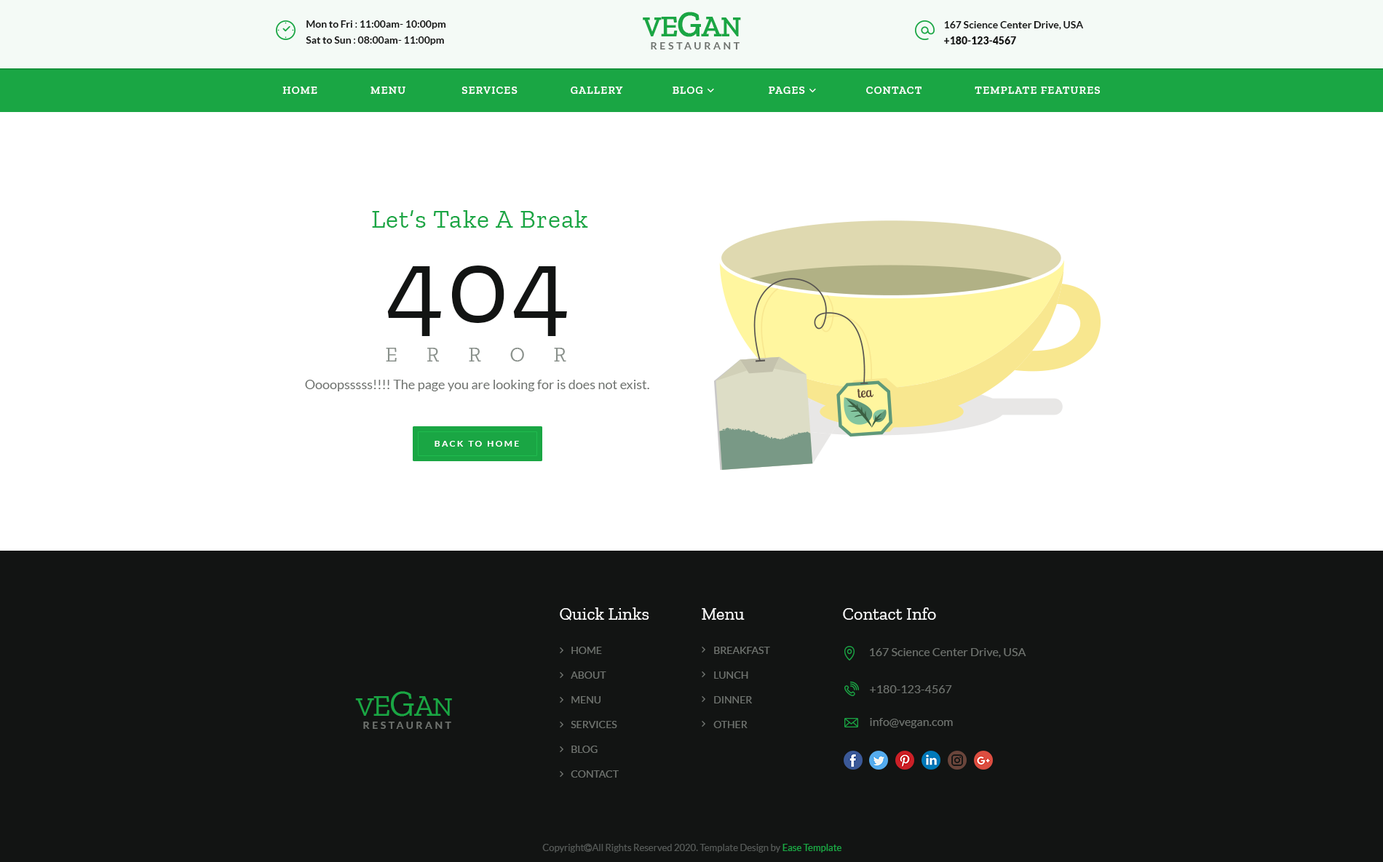
<style>
.page{position:relative;width:1383px;height:862px;background:#ffffff}
.page>*{position:absolute;margin:0}
.t1{font:27.7px "ZillaSlab-SemiBold";letter-spacing:-0.03em;color:#1aa644;text-transform:uppercase}
.t2{font:30.6px "ZillaSlab-SemiBold";letter-spacing:-0.03em;color:#1aa644;text-transform:uppercase}
.t3{font:36.4px "ZillaSlab-SemiBold";letter-spacing:-0.03em;color:#1aa644;text-transform:uppercase}
.t4{font:10.2px/16px "Lato-Bold";color:#121312}
.t5{font:10.2px/16px "Lato-Regular";color:#121312}
.t6{font:10.2px/16px "Lato-Black";color:#121312}
.t7{font:10.2px "Lato-Bold";letter-spacing:0.26em;color:#6e726e;text-transform:uppercase}
.t8{font:26.2px "ZillaSlab-Regular";letter-spacing:0.03em;color:#1aa644}
.t9{font:20.4px/39.3px "ZillaSlab-Regular";letter-spacing:1.43em;color:#89908b;text-transform:uppercase}
.t10{font:107.7px/24px "ZillaSlab-Regular";letter-spacing:0.03em;color:#121413;text-transform:uppercase}
.t11{font:13.1px "Lato-Regular";color:#6e726e}
.t12{font:8.7px "Lato-Bold";letter-spacing:0.2em;color:#ffffff;text-transform:uppercase}
.t13{font:17.5px "ZillaSlab-Regular";color:#ffffff}
.t14{font:10.2px/24.7px "Lato-Regular";color:#6e726e;text-transform:uppercase}
.t15{font:11.6px "Lato-Regular";color:#6e726e}
.t16{font:27.7px "ZillaSlab-Regular";letter-spacing:-0.03em;color:#1aa644;text-transform:uppercase}
.t17{font:30.6px "ZillaSlab-Regular";letter-spacing:-0.03em;color:#1aa644;text-transform:uppercase}
.t18{font:36.4px "ZillaSlab-Regular";letter-spacing:-0.03em;color:#1aa644;text-transform:uppercase}
.t19{font:10.2px "Lato-Bold";letter-spacing:0.25em;color:#6e726e;text-transform:uppercase}
</style>
<div class="page">
<p class="t1" style="left:643px;top:12px;width:98px;height:25px">V<span class="t2">e</span><span class="t3">G</span><span class="t2">a</span>n</p>
<p class="t4" style="left:306px;top:20px;width:140px;height:25px">Mon to Fri<span class="t5"> : </span>11:00am- 10:00pm<br>Sat to Sun<span class="t5"> : </span>08:00am- 11:00pm</p>
<p class="t4" style="left:944px;top:21px;width:140px;height:23px">167 Science Center Drive, USA<br><span class="t6">+180-123-4567</span></p>
<p class="t7" style="left:651px;top:42px;width:88px;height:7px">Restaurant</p>
<p class="t8" style="left:372px;top:210px;width:216px;height:18px">Let’s Take A Break</p>
<p class="t9" style="left:386px;top:266px;width:181px;height:96px"><span class="t10">404<br></span>Error</p>
<p class="t11" style="left:305px;top:380px;width:344px;height:12px">Oooopsssss!!!! The page you are looking for is does not exist.</p>
<p class="t12" style="left:434px;top:441px;width:85px;height:6px">Back to Home</p>
<p class="t13" style="left:560px;top:608px;width:89px;height:13px">Quick Links</p>
<p class="t13" style="left:702px;top:608px;width:42px;height:12px">Menu</p>
<p class="t13" style="left:843px;top:608px;width:93px;height:12px">Contact Info</p>
<p class="t14" style="left:571px;top:647px;width:48px;height:131px">Home<br>About<br>Menu<br>Services<br>Blog<br>Contact</p>
<p class="t14" style="left:713px;top:647px;width:57px;height:81px">Breakfast<br>Lunch<br>Dinner<br>Other</p>
<p class="t15" style="left:870px;top:648px;width:156px;height:10px">167 Science Center Drive, USA</p>
<p class="t15" style="left:870px;top:686px;width:82px;height:8px">+180-123-4567</p>
<p class="t16" style="left:355px;top:691px;width:97px;height:26px">V<span class="t17">e</span><span class="t18">G</span><span class="t17">a</span>n</p>
<p class="t19" style="left:363px;top:722px;width:88px;height:7px">Restaurant</p>
<p class="t15" style="left:870px;top:718px;width:83px;height:10px">info@vegan.com</p>
</div>
